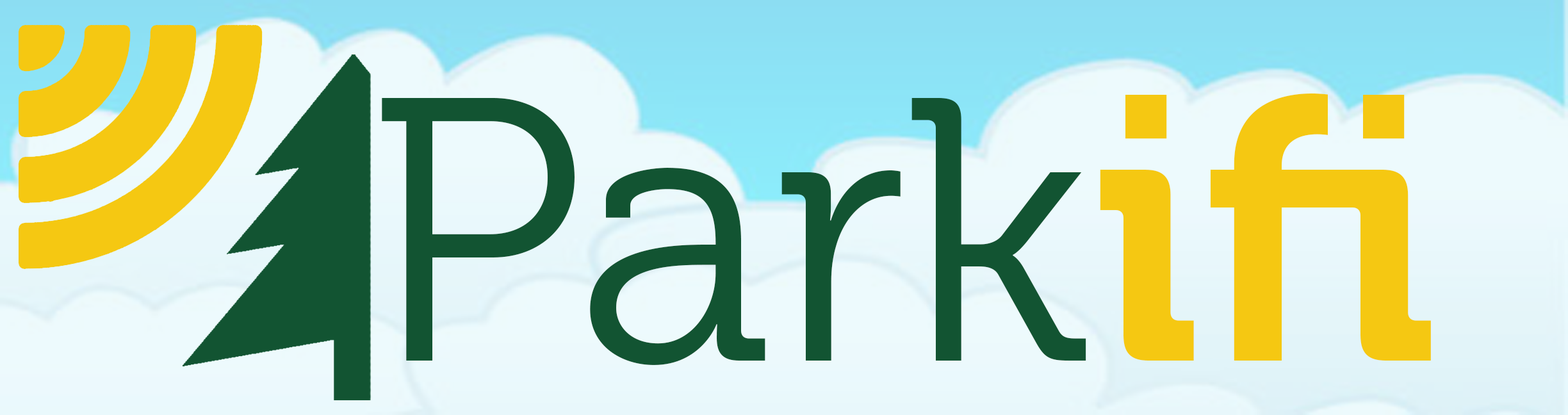
<style>
.page{position:relative;width:1568px;height:415px}
.page>*{position:absolute;margin:0}
.t1{font:374px "Museo-300";color:#125432}
.t2{font:374px "Museo-700";color:#f5c812}
.t3{font:374px "MuseoSlab-500";color:#125432}
</style>
<div class="page">
<p class="t1" style="left:382px;top:93px;width:1049px;height:272px">Park<span class="t2">ifi<br></span><span class="t3">v</span></p>
</div>
